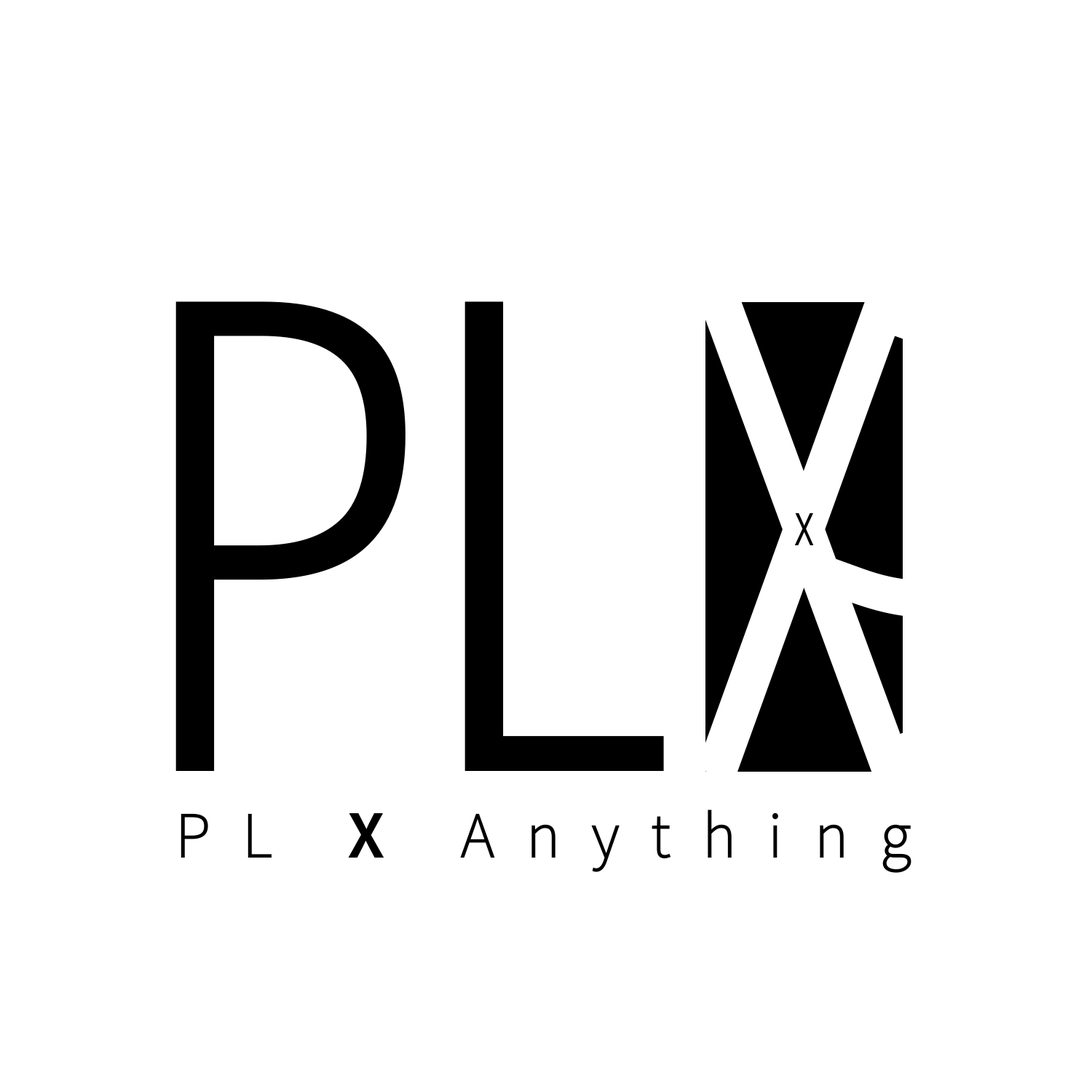
<style>
.page{position:relative;width:1092px;height:1092px;background:#ffffff}
.page>*{position:absolute;margin:0}
.t1{font:655.2px "NotoSans-CondensedLight";letter-spacing:-0.029em;color:#000000}
.t2{font:58.2px "NotoSans-ExtraCondensedThin";letter-spacing:0.55em;color:#000000}
.t3{font:58.2px "NotoSansKR-Thin";letter-spacing:0.55em;color:#000000}
.t4{font:58.2px "NotoSansKR-Medium";letter-spacing:0.55em;color:#000000}
</style>
<div class="page">
<p class="t1" style="left:175px;top:301px;width:490px;height:471px">PL</p>
<p class="t2" style="left:794px;top:512px;width:20px;height:34px">x</p>
<p class="t3" style="left:180px;top:809px;width:732px;height:65px">PL <span class="t4">X</span> Anything</p>
</div>
